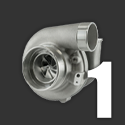
<style>
.page{position:relative;width:125px;height:125px;background:#333333}
.page>*{position:absolute;margin:0}
.t1{font:70.9px "Impact";color:#ffffff}
</style>
<div class="page">
<p class="t1" style="left:87px;top:61px;width:25px;height:57px">1</p>
</div>
